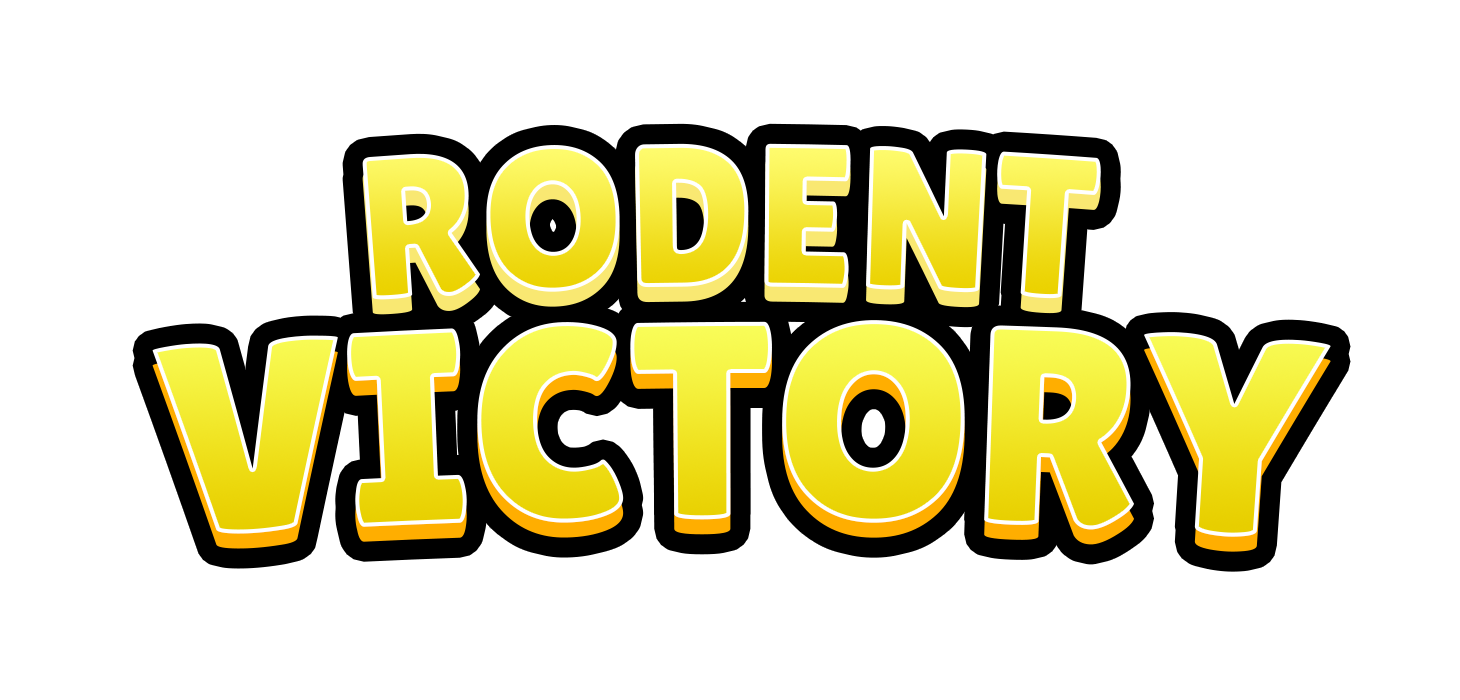
<style>
.page{position:relative;width:1460px;height:700px;background:#ffffff}
.page>*{position:absolute;margin:0}
.t1{font:203.8px "LilitaOne"}
.t2{font:280.4px "LilitaOne"}
</style>
<div class="page">
<p class="t1" style="left:362px;top:143px;width:739px;height:157px">RODENT</p>
<p class="t2" style="left:152px;top:320px;width:1179px;height:217px">VICTORY</p>
</div>
